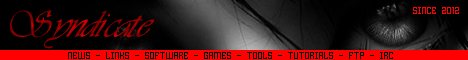
<style>
.page{position:relative;width:468px;height:60px;background:#000000}
.page>*{position:absolute;margin:0}
.t1{font:36px "Astrania"}
.t2{font:10px "HomespunTTBRK";color:#ff0000}
.t3{font:10px "HomespunTTBRK";color:#000000}
</style>
<div class="page">
<p class="t1" style="left:10px;top:10px;width:145px;height:39px">Syndicate</p>
<p class="t2" style="left:413px;top:7px;width:46px;height:7px">SINCE 2012</p>
<p class="t3" style="left:68px;top:52px;width:325px;height:7px">NEWS - LINKS - SOFTWARE - GAMES - TOOLS - TUTORIALS - FTP - IRC</p>
</div>
